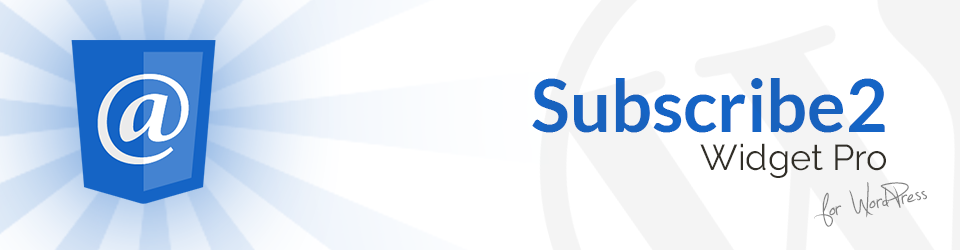
<style>
.page{position:relative;width:960px;height:250px;background:#ffffff}
.page>*{position:absolute;margin:0}
.t1{font:72px "Lato-Bold";color:#1564c5}
.t2{font:36px "Raleway";color:#312e27}
.t3{font:60px "Jellyka---Estrya's-Handwriting";color:#808080}
</style>
<div class="page">
<p class="t1" style="left:532px;top:78px;width:353px;height:55px">Subscribe2</p>
<p class="t2" style="left:700px;top:143px;width:186px;height:35px">Widget Pro</p>
<p class="t3" style="left:814px;top:182px;width:113px;height:45px;rotate:-10deg">for WordPress</p>
</div>
